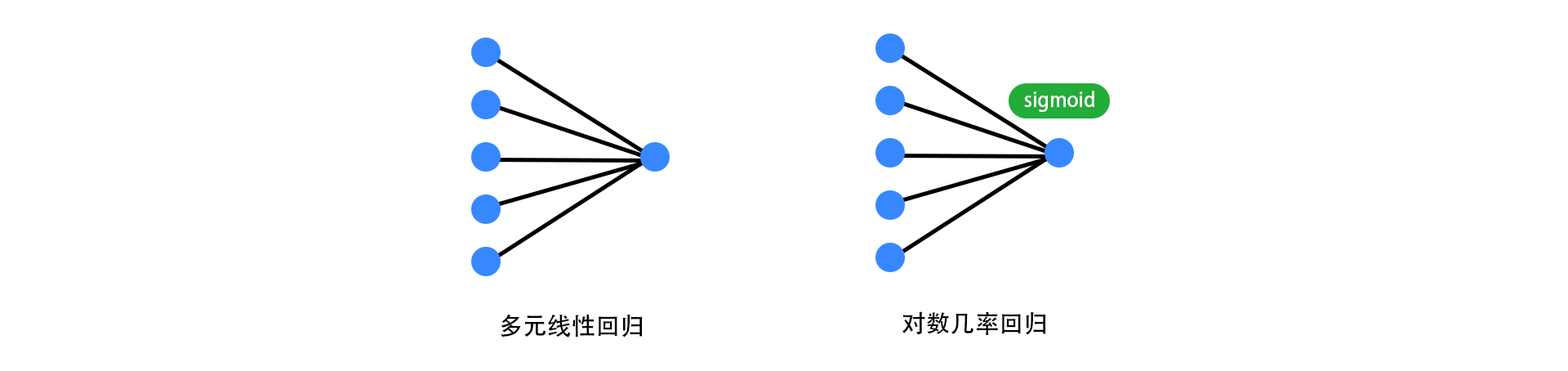
<style>
.page{position:relative;width:1568px;height:371px;background:#ffffff}
.page>*{position:absolute;margin:0}
.t1{font:19.6px "AdobeHeitiStd-Regular";color:#ffffff}
.t2{font:24.5px "AdobeHeitiStd-Regular";color:#000000}
</style>
<div class="page">
<p class="t1" style="left:1024px;top:91px;width:70px;height:21px">sigmoid</p>
<p class="t2" style="left:501px;top:314px;width:142px;height:23px">多元线性回归</p>
<p class="t2" style="left:902px;top:311px;width:144px;height:24px">对数几率回归</p>
</div>
